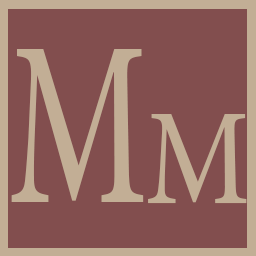
<style>
.page{position:relative;width:256px;height:256px;background:#824e4e}
.page>*{position:absolute;margin:0}
.t1{font:232.5px "AdobeHebrew-Regular";color:#c2ae95;scale:0.66 1}
.t2{font:134.4px "AdobeHebrew-Regular";color:#c2ae95;scale:0.85 1}
</style>
<div class="page">
<p class="t1" style="left:11px;top:49px;width:133px;height:153px">M</p>
<p class="t2" style="left:148px;top:114px;width:99px;height:90px">M</p>
</div>
